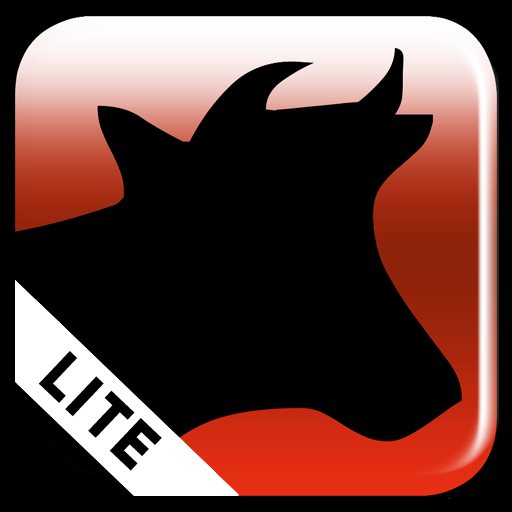
<style>
.page{position:relative;width:512px;height:512px;background:#000000}
.page>*{position:absolute;margin:0}
.t1{font:60px "ApexSansExtraBoldST";letter-spacing:0.05em;color:#000000}
</style>
<div class="page">
<p class="t1" style="left:38px;top:351px;width:124px;height:120px;rotate:43deg">LITE</p>
</div>
